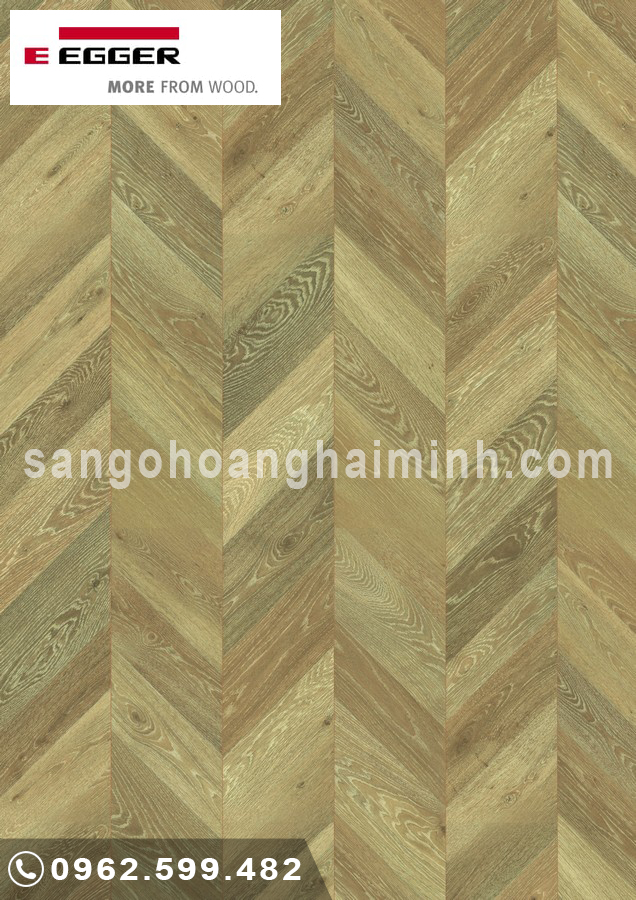
<style>
.page{position:relative;width:636px;height:900px}
.page>*{position:absolute;margin:0}
.t1{font:52.8px "Arial-BoldMT";letter-spacing:0.08em;color:#d2ccb8;scale:0.82 1}
.t2{font:29.9px "Arial-BoldMT";letter-spacing:0.08em;color:#ffffff;scale:1.2 1}
</style>
<div class="page">
<p class="t1" style="left:24px;top:440px;width:588px;height:49px">sangohoanghaiminh.com</p>
<p class="t2" style="left:51px;top:858px;width:250px;height:22px">0962.599.482</p>
</div>
